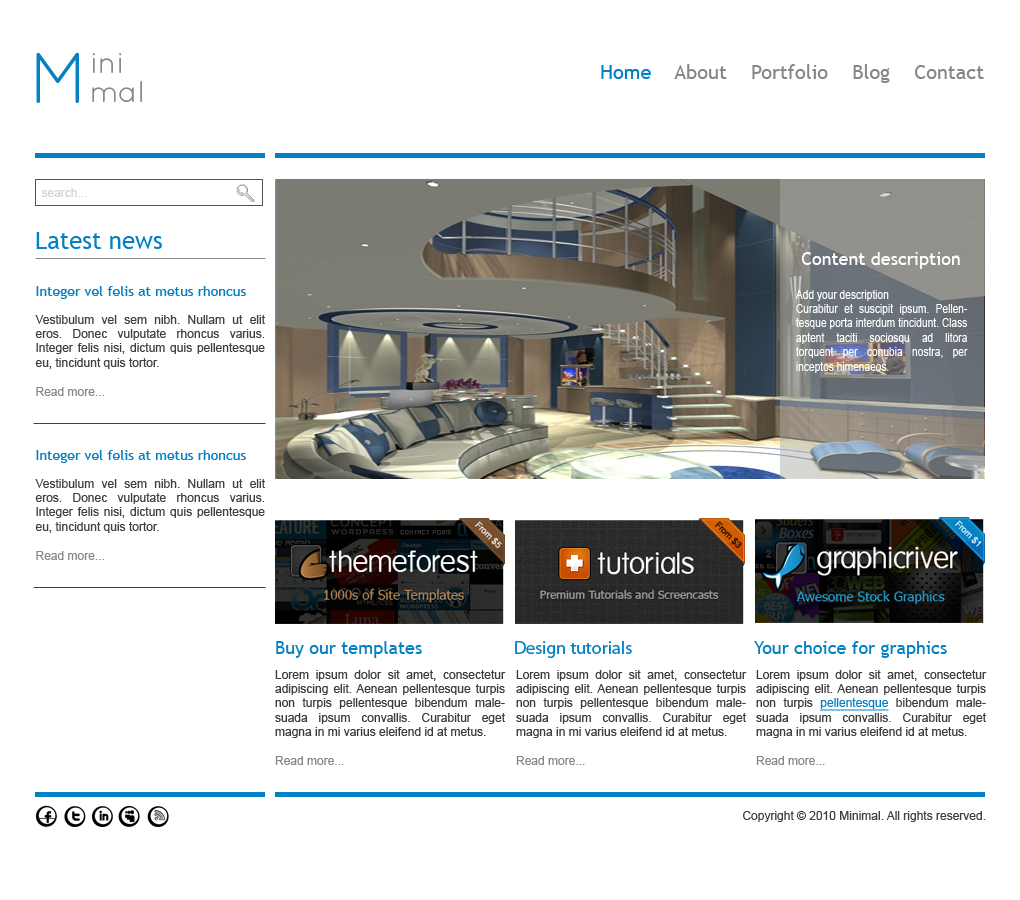
<style>
.page{position:relative;width:1020px;height:900px;background:#ffffff}
.page>*{position:absolute;margin:0}
.t1{font:72px "QuicksandBook-Regular";color:#0481c2}
.t2{font:30px "QuicksandBook-Regular";color:#878787}
.t3{font:20px "TrebuchetMS";color:#878787}
.t4{font:20px "TrebuchetMS";color:#0481c2}
.t5{font:12px "ArialMT";color:#d2d1d1}
.t6{font:24px "TrebuchetMS";color:#0481c2}
.t7{font:18px "TrebuchetMS";color:#ffffff}
.t8{font:14px "TrebuchetMS";color:#0481c2}
.t9{font:12px "ArialMT";color:#ffffff;scale:0.85 1}
.t10{font:12px "ArialMT";color:#404040}
.t11{font:12px "ArialMT";color:#878787}
.t12{font:18px "TrebuchetMS";color:#0481c2}
.t13{font:12px "ArialMT";color:#3c3c3c}
.t14{font:12px "ArialMT";color:#0481c2;text-decoration:underline}
</style>
<div class="page">
<p class="t1" style="left:36px;top:52px;width:43px;height:51px">M</p>
<p class="t2" style="left:93px;top:53px;width:28px;height:20px">ini</p>
<p class="t3" style="left:601px;top:64px;width:383px;height:19px"><span class="t4">Home  </span>  About    Portfolio    Blog    Contact</p>
<p class="t2" style="left:92px;top:81px;width:50px;height:21px">mal</p>
<p class="t5" style="left:41px;top:188px;width:46px;height:9px">search...</p>
<p class="t6" style="left:36px;top:232px;width:126px;height:17px">Latest news</p>
<p class="t7" style="left:801px;top:252px;width:159px;height:17px">Content description</p>
<p class="t8" style="left:36px;top:286px;width:210px;height:13px">Integer vel felis at metus rhoncus</p>
<p class="t9" style="left:795px;top:290px;width:173px;height:83px;text-align:justify">Add your description<br>Curabitur et suscipit ipsum. Pellentesque porta interdum tincidunt. Class aptent taciti sociosqu ad litora torquent per conubia nostra, per inceptos himenaeos.</p>
<p class="t10" style="left:35px;top:315px;width:230px;height:81px;text-align:justify">Vestibulum vel sem nibh. Nullam ut elit eros. Donec vulputate rhoncus varius. Integer felis nisi, dictum quis pellentesque eu, tincidunt quis tortor.<br><br><span class="t11">Read more...</span></p>
<p class="t8" style="left:36px;top:450px;width:210px;height:13px">Integer vel felis at metus rhoncus</p>
<p class="t10" style="left:35px;top:479px;width:230px;height:81px;text-align:justify">Vestibulum vel sem nibh. Nullam ut elit eros. Donec vulputate rhoncus varius. Integer felis nisi, dictum quis pellentesque eu, tincidunt quis tortor.<br><br><span class="t11">Read more...</span></p>
<p class="t12" style="left:276px;top:641px;width:146px;height:17px">Buy our templates</p>
<p class="t12" style="left:515px;top:641px;width:117px;height:17px">Design tutorials</p>
<p class="t12" style="left:754px;top:641px;width:193px;height:17px">Your choice for graphics</p>
<p class="t13" style="left:275px;top:670px;width:231px;height:95px;text-align:justify">Lorem ipsum dolor sit amet, consectetur adipiscing elit. Aenean pellentesque turpis non turpis pellentesque bibendum malesuada ipsum convallis. Curabitur eget magna in mi varius eleifend id at metus.<br><br><span class="t11">Read more...</span></p>
<p class="t13" style="left:516px;top:670px;width:231px;height:95px;text-align:justify">Lorem ipsum dolor sit amet, consectetur adipiscing elit. Aenean pellentesque turpis non turpis pellentesque bibendum malesuada ipsum convallis. Curabitur eget magna in mi varius eleifend id at metus.<br><br><span class="t11">Read more...</span></p>
<p class="t13" style="left:756px;top:670px;width:231px;height:95px;text-align:justify">Lorem ipsum dolor sit amet, consectetur adipiscing elit. Aenean pellentesque turpis non turpis <span class="t14">pellentesque</span> bibendum malesuada ipsum convallis. Curabitur eget magna in mi varius eleifend id at metus.<br><br><span class="t11">Read more...</span></p>
<p class="t10" style="left:743px;top:811px;width:243px;height:11px">Copyright © 2010 Minimal. All rights reserved.</p>
</div>
